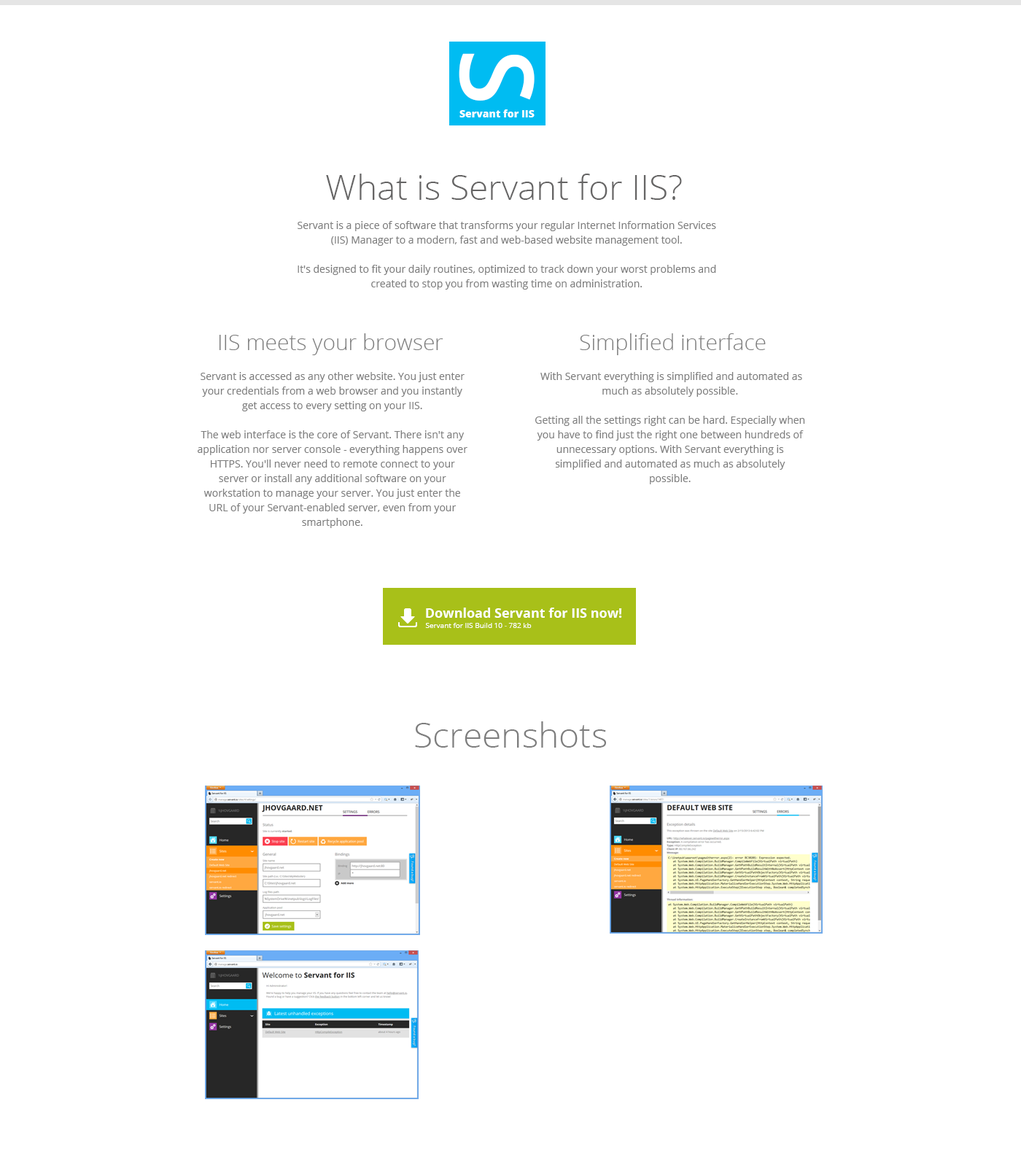
<style>
.page{position:relative;width:1021px;height:1167px;background:#ffffff}
.page>*{position:absolute;margin:0}
.t1{font:102.1px "OpenSans-Semibold";color:#ffffff}
.t2{font:10.2px "OpenSans-Extrabold";color:#ffffff}
.t3{font:35px "OpenSans-Light";color:#666565}
.t4{font:10.2px/14.6px "OpenSans";color:#7e7e7e}
.t5{font:21.9px "OpenSans-Light";color:#7e7e7e}
.t6{font:13.1px "OpenSans-Bold";color:#ffffff}
.t7{font:7.3px "OpenSans";color:#ffffff}
.t8{font:35px "OpenSans-Light";color:#7e7e7e}
</style>
<div class="page">
<p class="t1" style="left:459px;top:53px;width:76px;height:48px;rotate:90deg">S</p>
<p class="t2" style="left:460px;top:109px;width:75px;height:8px">Servant for IIS</p>
<p class="t3" style="left:326px;top:174px;width:356px;height:26px">What is Servant for IIS?</p>
<p class="t4" style="left:298px;top:221px;width:418px;height:69px;text-align:center">Servant is a piece of software that transforms your regular Internet Information Services (IIS) Manager to a modern, fast and web-based website management tool.<br><br>It's designed to fit your daily routines, optimized to track down your worst problems and created to stop you from wasting time on administration.</p>
<p class="t5" style="left:219px;top:333px;width:225px;height:22px">IIS meets your browser</p>
<p class="t5" style="left:580px;top:333px;width:186px;height:22px">Simplified interface</p>
<p class="t4" style="left:198px;top:372px;width:270px;height:156px;text-align:center">Servant is accessed as any other website. You just enter your credentials from a web browser and you instantly get access to every setting on your IIS.<br><br>The web interface is the core of Servant. There isn't any application nor server console - everything happens over HTTPS. You'll never need to remote connect to your server or install any additional software on your workstation to manage your server. You just enter the URL of your Servant-enabled server, even from your smartphone.</p>
<p class="t4" style="left:536px;top:372px;width:269px;height:112px;text-align:center">With Servant everything is simplified and automated as much as absolutely possible.<br><br>Getting all the settings right can be hard. Especially when you have to find just the right one between hundreds of unnecessary options. With Servant everything is simplified and automated as much as absolutely possible.</p>
<p class="t6" style="left:426px;top:608px;width:196px;height:10px">Download Servant for IIS now!</p>
<p class="t7" style="left:425px;top:623px;width:107px;height:5px">Servant for IIS Build 10 - 782 kb</p>
<p class="t8" style="left:415px;top:722px;width:191px;height:26px">Screenshots</p>
</div>
